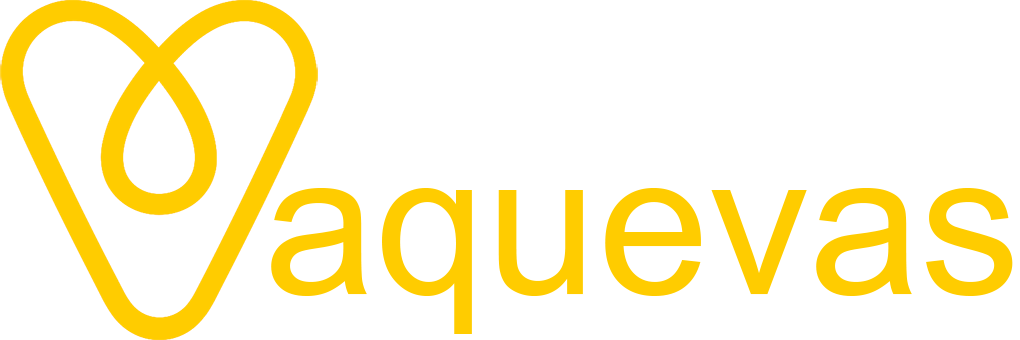
<style>
.page{position:relative;width:1020px;height:340px;background:#ffffff}
.page>*{position:absolute;margin:0}
.t1{font:200px "ArialMT";color:#ffcc00}
</style>
<div class="page">
<p class="t1" style="left:271px;top:188px;width:742px;height:146px">aquevas</p>
</div>
